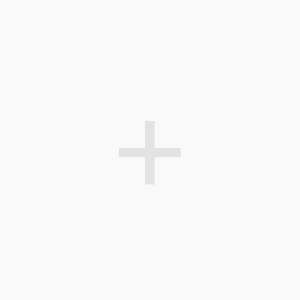
<style>
.page{position:relative;width:300px;height:300px;background:#f9f9f9}
.page>*{position:absolute;margin:0}
.t1{font:120px "MyriadPro-Semibold";color:#e3e3e3}
</style>
<div class="page">
<p class="t1" style="left:118px;top:120px;width:63px;height:65px">+</p>
</div>
